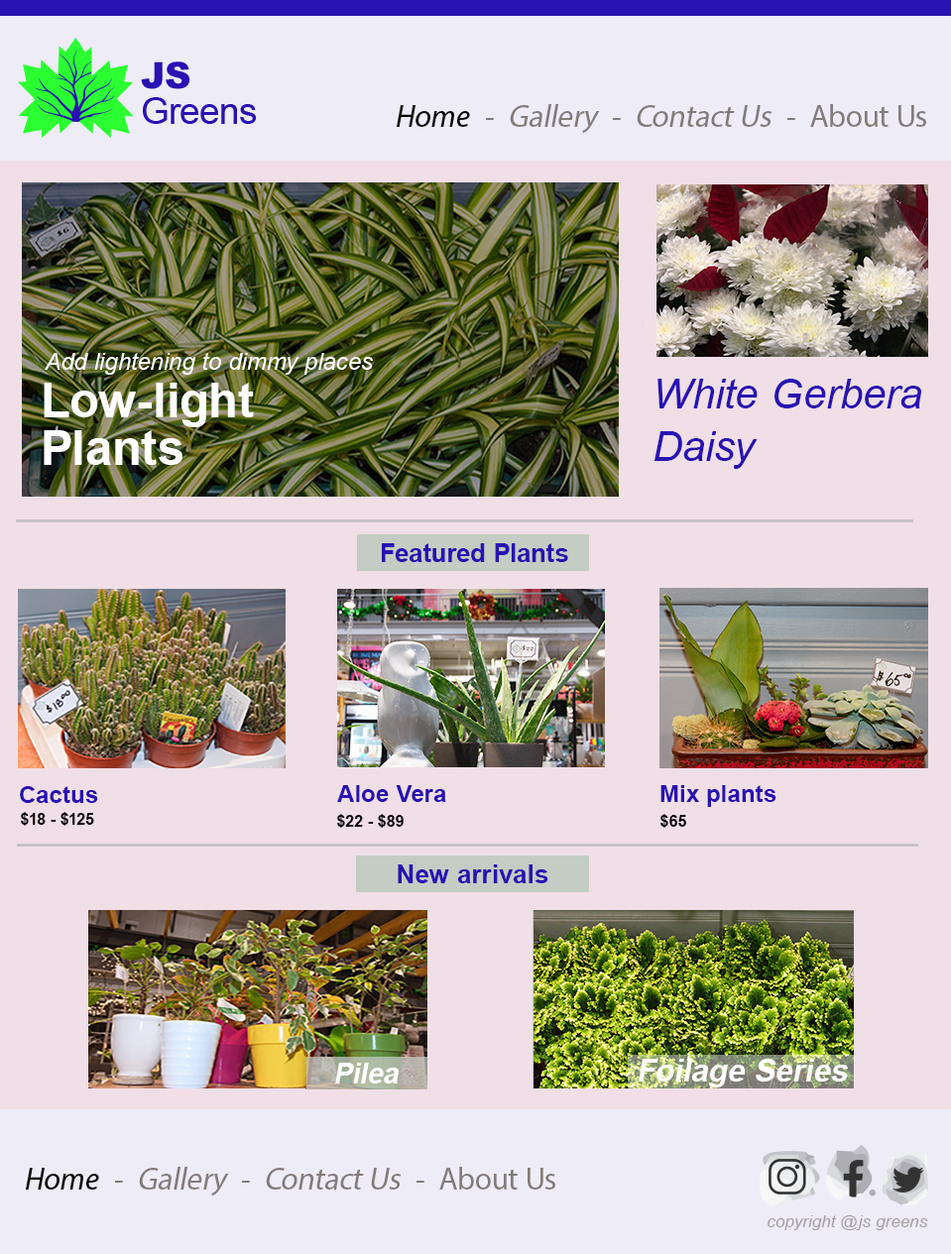
<style>
.page{position:relative;width:951px;height:1254px;background:#f0dfe7}
.page>*{position:absolute;margin:0}
.t1{font:31.1px "MyriadPro-Regular";letter-spacing:0.005em;color:#827b7b}
.t2{font:31.1px "MyriadPro-It";letter-spacing:0.005em;color:#827b7b}
.t3{font:31.1px "MyriadPro-Regular";letter-spacing:0.005em;color:#827b7b;font-style:italic}
.t4{font:31.1px "MyriadPro-It";letter-spacing:0.005em;color:#080808}
.t5{font:23.8px "Arial-ItalicMT";letter-spacing:0.005em;color:#ffffff}
.t6{font:48.9px/47.6px "Arial-BoldMT";letter-spacing:0.005em;color:#ffffff}
.t7{font:42px/52.5px "Arial-ItalicMT";letter-spacing:0.005em;color:#2812b2}
.t8{font:25.6px "Arial-BoldMT";letter-spacing:0.005em;color:#2812b2}
.t9{font:23.8px "Arial-BoldMT";letter-spacing:0.005em;color:#2812b2}
.t10{font:15.9px "Arial-BoldMT";letter-spacing:0.005em;color:#040404}
.t11{font:26.2px "Arial-BoldMT";letter-spacing:0.005em;color:#2812b2}
.t12{font:31.5px "Arial-BoldMT";letter-spacing:0.005em;color:#ffffff;font-style:italic}
.t13{font:28.5px "Arial-BoldMT";letter-spacing:0.005em;color:#ffffff;font-style:italic}
.t14{font:17.3px "Arial-ItalicMT";letter-spacing:0.005em;color:#a59fa3}
</style>
<div class="page">
<p class="t1" style="left:397px;top:104px;width:529px;height:30px"><span class="t2">Home  </span>-  <span class="t3">Gallery  </span>-  <span class="t3">Contact Us  </span>-  About Us</p>
<p class="t4" style="left:397px;top:105px;width:73px;height:22px">Home</p>
<p class="t5" style="left:45px;top:353px;width:328px;height:22px">Add lightening to dimmy places</p>
<p class="t6" style="left:44px;top:383px;width:210px;height:82px;text-align:justify">Low-light <br>Plants</p>
<p class="t7" style="left:654px;top:379px;width:267px;height:90px;text-align:justify">White Gerbera<br>Daisy</p>
<p class="t8" style="left:382px;top:543px;width:186px;height:19px">Featured Plants</p>
<p class="t9" style="left:337px;top:785px;width:109px;height:17px">Aloe Vera</p>
<p class="t9" style="left:660px;top:785px;width:116px;height:22px">Mix plants</p>
<p class="t9" style="left:20px;top:786px;width:78px;height:17px">Cactus</p>
<p class="t10" style="left:21px;top:812px;width:73px;height:14px">$18 - $125</p>
<p class="t10" style="left:337px;top:814px;width:67px;height:14px">$22 - $89</p>
<p class="t10" style="left:660px;top:814px;width:26px;height:14px">$65</p>
<p class="t11" style="left:398px;top:865px;width:150px;height:18px">New arrivals</p>
<p class="t12" style="left:638px;top:1059px;width:210px;height:29px">Foilage Series</p>
<p class="t13" style="left:335px;top:1063px;width:64px;height:21px">Pilea</p>
<p class="t1" style="left:26px;top:1167px;width:529px;height:30px"><span class="t2">Home  </span>-  <span class="t3">Gallery  </span>-  <span class="t3">Contact Us  </span>-  About Us</p>
<p class="t4" style="left:26px;top:1168px;width:73px;height:22px">Home</p>
<p class="t14" style="left:767px;top:1215px;width:161px;height:15px">copyright @js greens</p>
</div>
